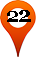
<style>
.page{position:relative;width:36px;height:57px;background:#ffffff}
.page>*{position:absolute;margin:0}
.t1{font:20px "Georgia-Bold";color:#000000}
.t2{font:22px "Georgia-Bold";color:#000000}
</style>
<div class="page">
<p class="t1" style="left:7px;top:11px;width:11px;height:11px">2</p>
<p class="t2" style="left:19px;top:10px;width:12px;height:12px">2</p>
</div>
